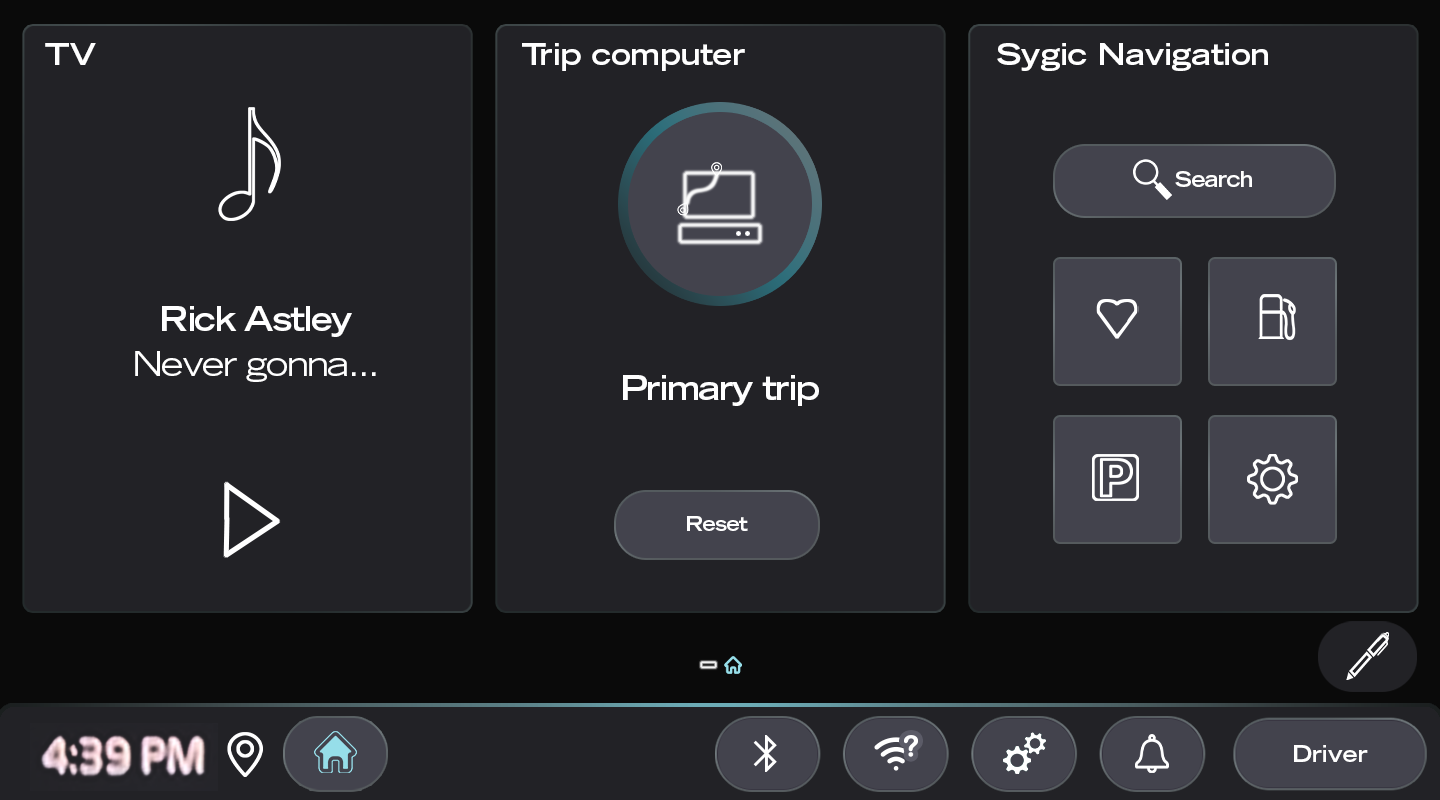
<style>
.page{position:relative;width:1440px;height:800px;background:#222226}
.page>*{position:absolute;margin:0}
.t1{font:30px "TradeGothicLTStd-BoldExt";letter-spacing:-0.02em;color:#ffffff}
.t2{font:21.4px "TradeGothicLTStd-BoldExt";letter-spacing:-0.05em;color:#ffffff}
.t3{font:33px "TradeGothicLTStd-BoldExt";letter-spacing:-0.05em;color:#ffffff}
.t4{font:33px "TradeGothicLTStd-Extended";letter-spacing:-0.05em;color:#ffffff}
.t5{font:20.4px "TradeGothicLTStd-BoldExt";letter-spacing:-0.05em;color:#ffffff}
.t6{font:23px "TradeGothicLTStd-BoldExt";letter-spacing:-0.02em;color:#ffffff}
</style>
<div class="page">
<p class="t1" style="left:45px;top:43px;width:51px;height:22px">TV</p>
<p class="t1" style="left:522px;top:43px;width:223px;height:28px">Trip computer</p>
<p class="t1" style="left:997px;top:43px;width:271px;height:28px">Sygic Navigation</p>
<p class="t2" style="left:1175px;top:171px;width:77px;height:16px">Search</p>
<p class="t3" style="left:162px;top:306px;width:190px;height:31px">Rick Astley</p>
<p class="t4" style="left:135px;top:351px;width:241px;height:31px">Never gonna...</p>
<p class="t3" style="left:623px;top:375px;width:196px;height:31px">Primary trip</p>
<p class="t5" style="left:687px;top:516px;width:61px;height:15px">Reset</p>
<p class="t6" style="left:1294px;top:745px;width:74px;height:17px">Driver</p>
</div>
